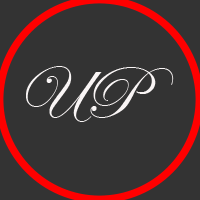
<style>
.page{position:relative;width:200px;height:200px;background:#333333}
.page>*{position:absolute;margin:0}
.t1{font:75px "EdwardianScriptITC";color:#f9f5f5}
</style>
<div class="page">
<p class="t1" style="left:26px;top:66px;width:148px;height:56px">UP</p>
</div>
